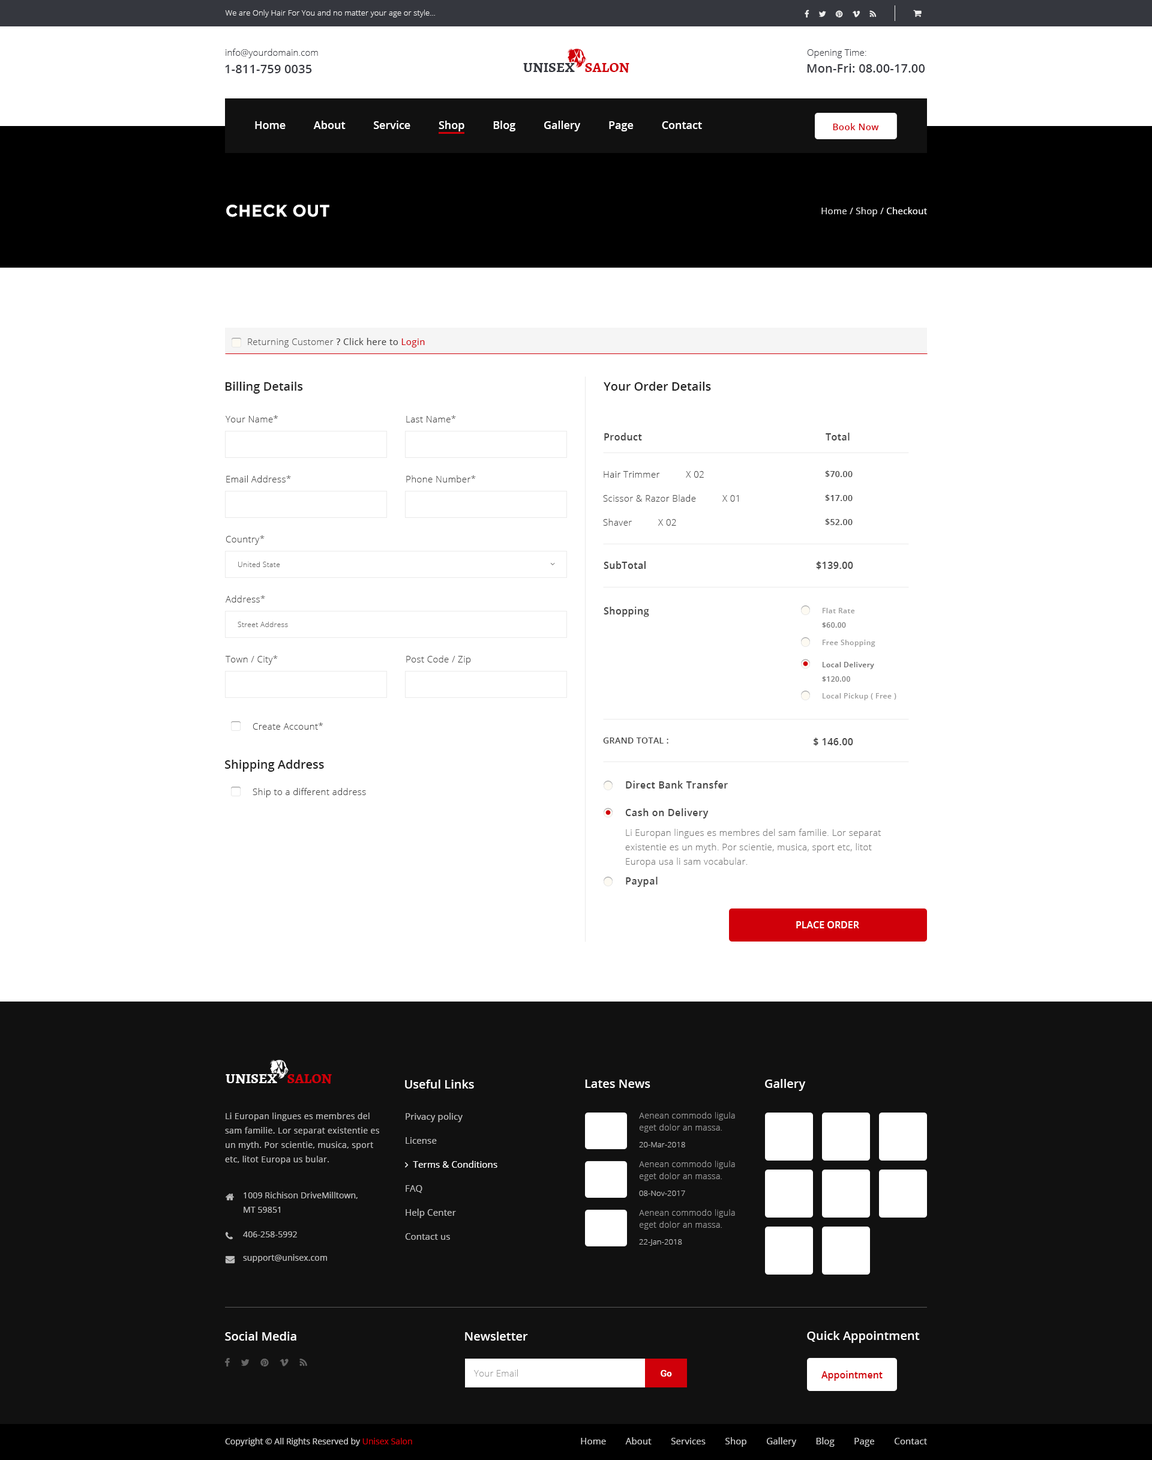
<style>
.page{position:relative;width:1152px;height:1460px;background:#ffffff}
.page>*{position:absolute;margin:0}
.t1{font:7.8px "OpenSans-Light";letter-spacing:0.01em;color:#efefef}
.t2{font:9px "OpenSans-Light";letter-spacing:0.01em;color:#35373e}
.t3{font:12px "OpenSans-Semibold";letter-spacing:0.01em;color:#35373e}
.t4{font:14.4px "Alegreya-Bold";color:#35373e;text-transform:uppercase}
.t5{font:14.4px "Alegreya-Bold";color:#d00009;text-transform:uppercase}
.t6{font:10.8px "OpenSans-Semibold";color:#ffffff}
.t7{font:9px "OpenSans-Semibold";letter-spacing:0.03em;color:#d00009}
.t8{font:16.8px "Montserrat-Bold";letter-spacing:0.02em;color:#ffffff;text-transform:uppercase}
.t9{font:9px "OpenSans";letter-spacing:0.02em;color:#dddddd}
.t10{font:9px "OpenSans";letter-spacing:0.02em;color:#ffffff}
.t11{font:9px "OpenSans-Light";letter-spacing:0.03em;color:#555555}
.t12{font:9px "OpenSans-Semibold";letter-spacing:0.03em;color:#444444}
.t13{font:9px "OpenSans";letter-spacing:0.03em;color:#444444}
.t14{font:9px "OpenSans";letter-spacing:0.03em;color:#d00009}
.t15{font:12px "OpenSans-Semibold";color:#222222}
.t16{font:9px "OpenSans-Light";letter-spacing:0.03em;color:#444444}
.t17{font:9.6px "OpenSans-Semibold";letter-spacing:0.03em;color:#444444}
.t18{font:9px/24px "OpenSans-Light";letter-spacing:0.03em;color:#444444}
.t19{font:8.4px/24px "OpenSans-Semibold";letter-spacing:0.03em;color:#444444}
.t20{font:7.2px "OpenSans-Light";letter-spacing:0.03em;color:#666666}
.t21{font:9.6px "OpenSans-Semibold";letter-spacing:0.03em;color:#444444;text-transform:uppercase}
.t22{font:7.2px "OpenSans-Semibold";letter-spacing:0.04em;color:#999999}
.t23{font:7.2px "OpenSans-Semibold";letter-spacing:0.04em;color:#777777}
.t24{font:7.2px "OpenSans-Semibold";letter-spacing:0.04em;color:#666666}
.t25{font:8.4px "OpenSans-Semibold";letter-spacing:0.03em;color:#444444;text-transform:uppercase}
.t26{font:9.6px "OpenSans-Semibold";letter-spacing:0.04em;color:#444444}
.t27{font:9px/14.4px "OpenSans-Light";letter-spacing:0.03em;color:#777777}
.t28{font:9.6px "OpenSans-Semibold";color:#ffffff;text-transform:uppercase}
.t29{font:14.4px "Alegreya-Bold";color:#ffffff;text-transform:uppercase}
.t30{font:12px "OpenSans-Semibold";color:#ffffff}
.t31{font:8.4px/14.4px "OpenSans";letter-spacing:0.03em;color:#bbbbbb}
.t32{font:8.4px/12px "OpenSans-Light";letter-spacing:0.03em;color:#999999}
.t33{font:7.8px "OpenSans-Light";letter-spacing:0.01em;color:#bbbbbb}
.t34{font:8.4px/14.4px "OpenSans";letter-spacing:0.01em;color:#bbbbbb}
.t35{font:8.4px "OpenSans";letter-spacing:0.01em;color:#bbbbbb}
.t36{font:9px "OpenSans-Light";letter-spacing:0.02em;color:#999999}
.t37{font:9px "RobotoSlab-Bold";letter-spacing:0.02em;color:#ffffff}
.t38{font:9.6px "OpenSans-Semibold";color:#d00009}
.t39{font:8.4px "OpenSans";color:#cccccc}
.t40{font:8.4px "OpenSans";color:#d00009}
.t41{font:9px "OpenSans";letter-spacing:0.01em;color:#cccccc}
</style>
<div class="page">
<p class="t1" style="left:225px;top:10px;width:210px;height:7px">We are Only Hair For You and no matter your age or style...</p>
<p class="t2" style="left:226px;top:49px;width:92px;height:9px">info@yourdomain.com</p>
<p class="t2" style="left:807px;top:49px;width:59px;height:9px">Opening Time:</p>
<p class="t3" style="left:225px;top:65px;width:87px;height:8px">1-811-759 0035</p>
<p class="t4" style="left:523px;top:62px;width:106px;height:11px">Unisex    <span class="t5">Salon</span></p>
<p class="t3" style="left:807px;top:64px;width:118px;height:9px">Mon-Fri: 08.00-17.00</p>
<p class="t6" style="left:255px;top:121px;width:447px;height:10px">Home          About          Service          Shop          Blog          Gallery          Page          Contact</p>
<p class="t7" style="left:833px;top:123px;width:46px;height:7px">Book Now</p>
<p class="t8" style="left:226px;top:205px;width:103px;height:12px">Check out</p>
<p class="t9" style="left:821px;top:207px;width:106px;height:10px">Home / Shop / <span class="t10">Checkout</span></p>
<p class="t11" style="left:248px;top:338px;width:177px;height:9px">Returning Customer<span class="t12"> ? </span><span class="t13">Click here to </span><span class="t14">Login</span></p>
<p class="t15" style="left:225px;top:382px;width:78px;height:12px">Billing Details</p>
<p class="t15" style="left:604px;top:382px;width:107px;height:9px">Your Order Details</p>
<p class="t16" style="left:226px;top:415px;width:52px;height:7px">Your Name*</p>
<p class="t16" style="left:406px;top:415px;width:50px;height:7px">Last Name*</p>
<p class="t17" style="left:604px;top:433px;width:38px;height:7px">Product</p>
<p class="t17" style="left:826px;top:433px;width:24px;height:7px">Total</p>
<p class="t18" style="left:603px;top:471px;width:136px;height:55px">Hair Trimmer          X 02<br>Scissor &amp; Razor Blade          X 01<br>Shaver          X 02</p>
<p class="t19" style="left:825px;top:470px;width:28px;height:55px">$70.00<br>$17.00<br>$52.00</p>
<p class="t16" style="left:226px;top:475px;width:65px;height:7px">Email Address*</p>
<p class="t16" style="left:406px;top:475px;width:70px;height:7px">Phone Number*</p>
<p class="t16" style="left:226px;top:535px;width:39px;height:10px">Country*</p>
<p class="t20" style="left:238px;top:562px;width:42px;height:5px">United State</p>
<p class="t17" style="left:604px;top:561px;width:42px;height:8px">SubTotal</p>
<p class="t21" style="left:816px;top:561px;width:37px;height:8px">$139.00</p>
<p class="t16" style="left:226px;top:595px;width:39px;height:7px">Address*</p>
<p class="t17" style="left:604px;top:607px;width:45px;height:10px">Shopping</p>
<p class="t22" style="left:823px;top:608px;width:32px;height:5px">Flat Rate</p>
<p class="t20" style="left:238px;top:622px;width:50px;height:5px">Street Address</p>
<p class="t23" style="left:822px;top:622px;width:24px;height:6px">$60.00</p>
<p class="t22" style="left:823px;top:640px;width:52px;height:7px">Free Shopping</p>
<p class="t16" style="left:225px;top:655px;width:53px;height:10px">Town / City*</p>
<p class="t16" style="left:406px;top:655px;width:65px;height:10px">Post Code / Zip</p>
<p class="t24" style="left:823px;top:662px;width:51px;height:7px">Local Delivery</p>
<p class="t23" style="left:822px;top:676px;width:28px;height:6px">$120.00</p>
<p class="t22" style="left:823px;top:693px;width:73px;height:7px">Local Pickup ( Free )</p>
<p class="t16" style="left:253px;top:722px;width:70px;height:8px">Create Account*</p>
<p class="t25" style="left:603px;top:737px;width:65px;height:6px">Grand total :</p>
<p class="t21" style="left:814px;top:737px;width:39px;height:9px">$ 146.00</p>
<p class="t15" style="left:225px;top:760px;width:99px;height:12px">Shipping Address</p>
<p class="t26" style="left:626px;top:781px;width:102px;height:7px">Direct Bank Transfer</p>
<p class="t16" style="left:253px;top:788px;width:113px;height:9px">Ship to a different address</p>
<p class="t26" style="left:625px;top:808px;width:84px;height:10px">Cash on Delivery</p>
<p class="t27" style="left:625px;top:829px;width:256px;height:38px">Li Europan lingues es membres del sam familie. Lor separat existentie es un myth. Por scientie, musica, sport etc, litot Europa usa li sam vocabular.</p>
<p class="t26" style="left:626px;top:877px;width:32px;height:10px">Paypal</p>
<p class="t28" style="left:796px;top:921px;width:63px;height:7px">Place Order</p>
<p class="t29" style="left:226px;top:1073px;width:106px;height:11px">Unisex    <span class="t5">Salon</span></p>
<p class="t30" style="left:405px;top:1079px;width:69px;height:9px">Useful Links</p>
<p class="t30" style="left:585px;top:1079px;width:65px;height:9px">Lates News</p>
<p class="t30" style="left:765px;top:1079px;width:41px;height:12px">Gallery</p>
<p class="t31" style="left:225px;top:1112px;width:154px;height:52px">Li Europan lingues es membres del sam familie. Lor separat existentie es un myth. Por scientie, musica, sport etc, litot Europa us bular.</p>
<p class="t32" style="left:639px;top:1112px;width:96px;height:20px">Aenean commodo ligula eget dolor an massa.</p>
<p class="t33" style="left:639px;top:1142px;width:46px;height:5px">20-Mar-2018</p>
<p class="t32" style="left:639px;top:1160px;width:96px;height:21px">Aenean commodo ligula eget dolor an massa.</p>
<p class="t34" style="left:244px;top:1192px;width:114px;height:21px">1009 Richison DriveMilltown, <br>MT 59851</p>
<p class="t33" style="left:639px;top:1190px;width:46px;height:6px">08-Nov-2017</p>
<p class="t32" style="left:639px;top:1209px;width:96px;height:20px">Aenean commodo ligula eget dolor an massa.</p>
<p class="t35" style="left:243px;top:1231px;width:54px;height:6px">406-258-5992</p>
<p class="t33" style="left:639px;top:1239px;width:43px;height:7px">22-Jan-2018</p>
<p class="t35" style="left:243px;top:1254px;width:84px;height:8px">support@unisex.com</p>
<p class="t30" style="left:225px;top:1331px;width:71px;height:9px">Social Media</p>
<p class="t30" style="left:465px;top:1331px;width:63px;height:9px">Newsletter</p>
<p class="t30" style="left:807px;top:1331px;width:113px;height:12px">Quick Appointment</p>
<p class="t36" style="left:474px;top:1369px;width:44px;height:7px">Your Email</p>
<p class="t37" style="left:661px;top:1370px;width:11px;height:6px">Go</p>
<p class="t38" style="left:821px;top:1370px;width:62px;height:11px">Appointment</p>
<p class="t39" style="left:225px;top:1438px;width:187px;height:8px">Copyright © All Rights Reserved by <span class="t40">Unisex Salon</span></p>
<p class="t41" style="left:581px;top:1437px;width:346px;height:10px">Home        About        Services        Shop        Gallery        Blog        Page        Contact</p>
</div>
